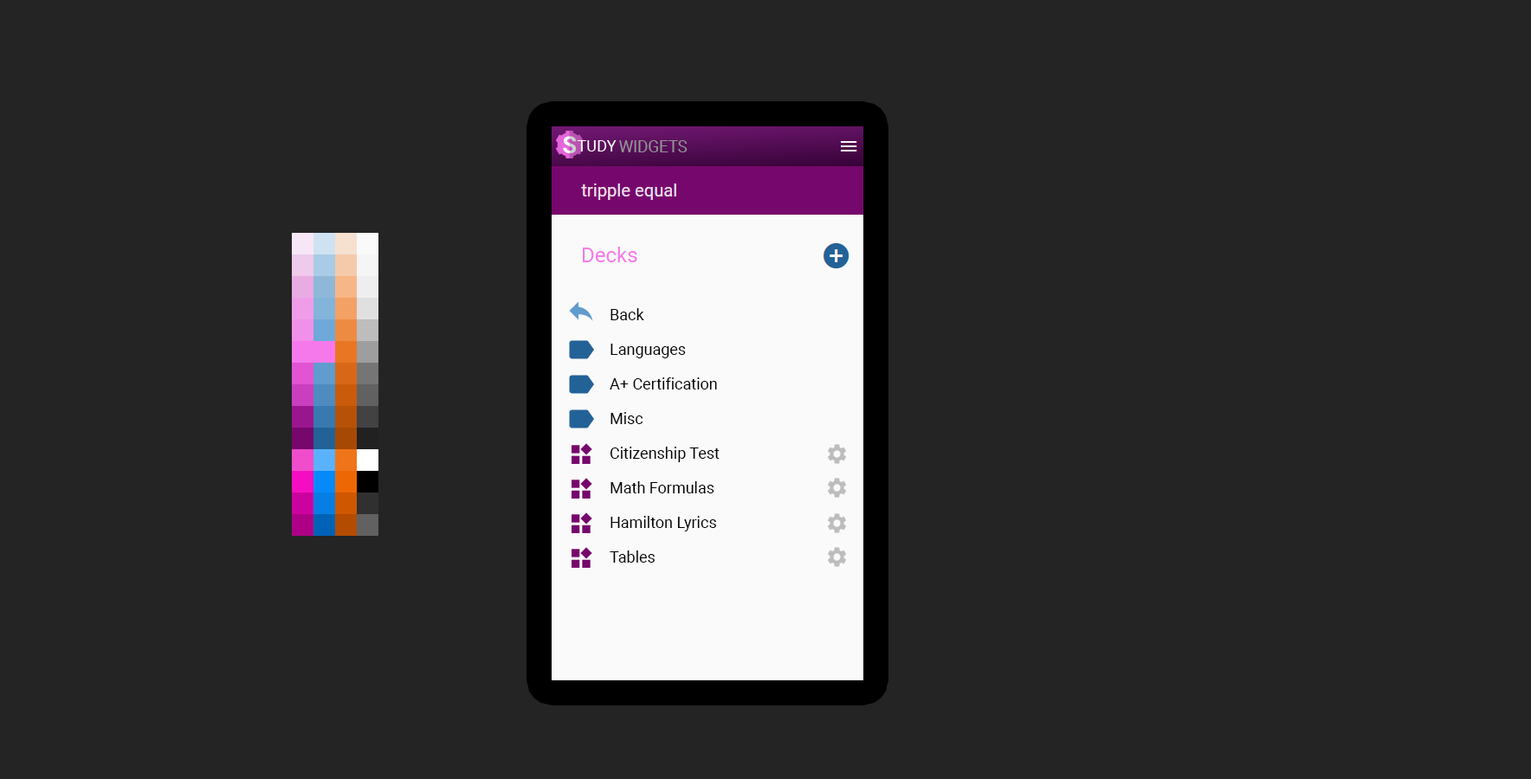
<style>
.page{position:relative;width:1531px;height:779px;background:#242424}
.page>*{position:absolute;margin:0}
.t1{font:15.6px "Roboto-Regular";color:#000000}
</style>
<div class="page">
<p class="t1" style="left:610px;top:308px;width:34px;height:12px">Back</p>
<p class="t1" style="left:610px;top:344px;width:76px;height:14px">Languages</p>
<p class="t1" style="left:609px;top:377px;width:108px;height:13px">A+ Certification</p>
<p class="t1" style="left:610px;top:412px;width:33px;height:12px">Misc</p>
<p class="t1" style="left:609px;top:447px;width:110px;height:15px">Citizenship Test</p>
<p class="t1" style="left:610px;top:481px;width:104px;height:12px">Math Formulas</p>
<p class="t1" style="left:610px;top:516px;width:106px;height:16px">Hamilton Lyrics</p>
<p class="t1" style="left:609px;top:551px;width:45px;height:12px">Tables</p>
</div>
